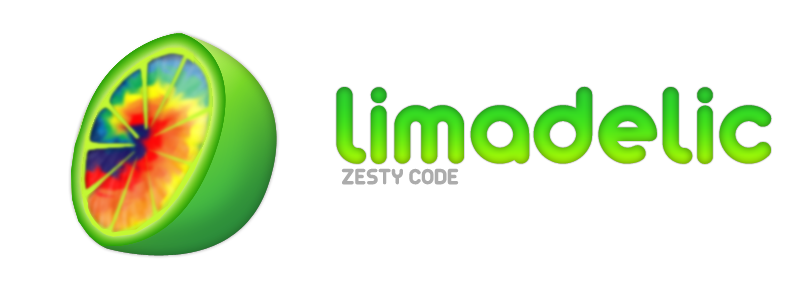
<style>
.page{position:relative;width:800px;height:300px;background:#ffffff}
.page>*{position:absolute;margin:0}
.t1{font:120px "Arista2.0"}
.t2{font:24px "Arista2.0";color:#acacac}
</style>
<div class="page">
<p class="t1" style="left:336px;top:86px;width:436px;height:78px">limadelic</p>
<p class="t2" style="left:341px;top:168px;width:118px;height:17px">ZESTY CODE</p>
</div>
